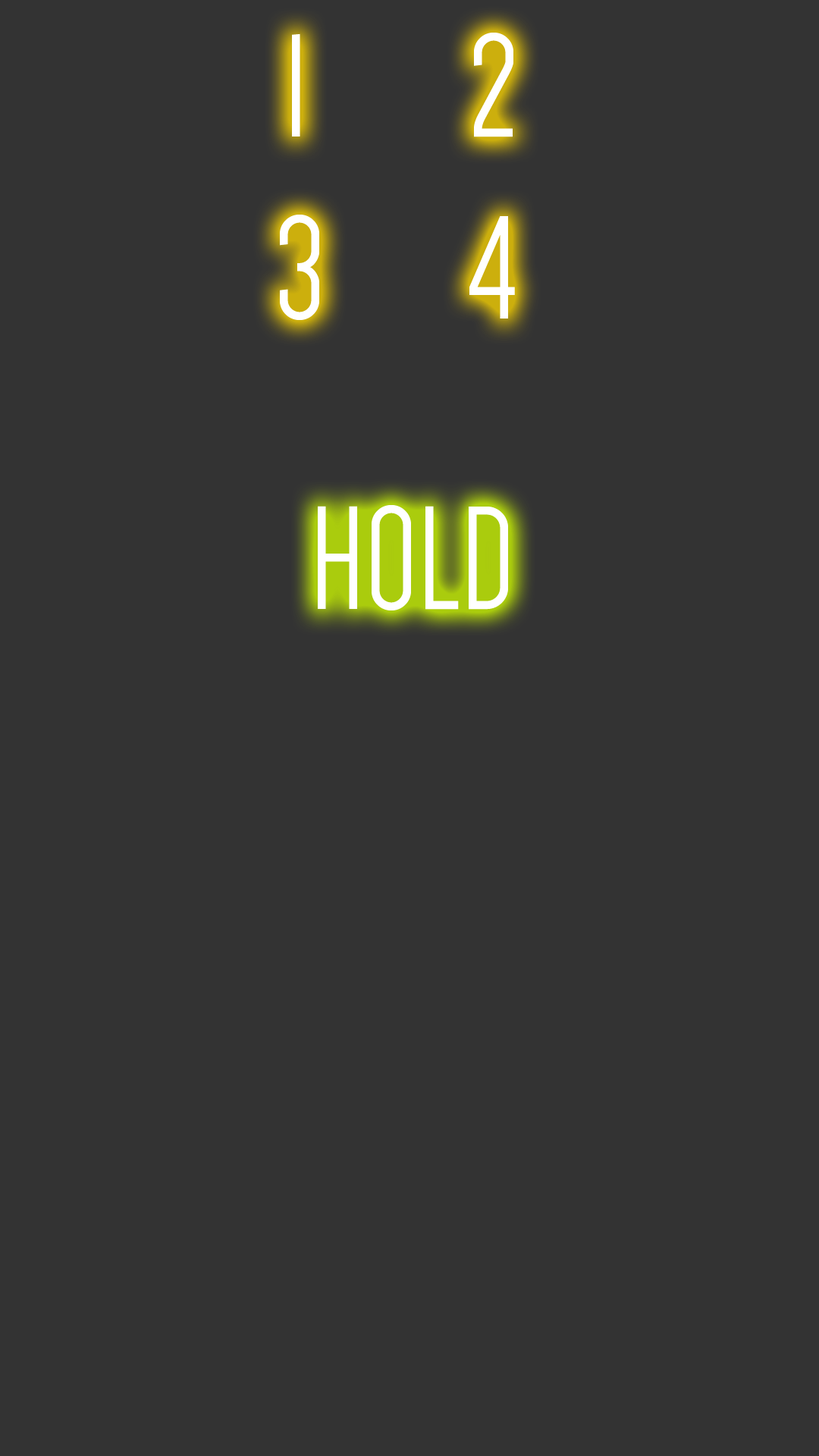
<style>
.page{position:relative;width:819px;height:1456px;background:#333333}
.page>*{position:absolute;margin:0}
.t1{font:151.7px "Dense-Regular";color:#ffffff}
.t2{font:54.6px "Dense-Regular";color:#ffffff}
</style>
<div class="page">
<p class="t1" style="left:280px;top:33px;width:235px;height:287px;text-align:center"><span class="t2">  </span>  1        2 <br>     3 4</p>
<p class="t1" style="left:318px;top:505px;width:190px;height:105px">HOLD</p>
</div>
